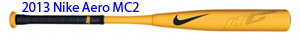
<style>
.page{position:relative;width:300px;height:41px;background:#ffffff}
.page>*{position:absolute;margin:0}
.t1{font:14px "MyriadPro-Regular";color:#0000ff}
</style>
<div class="page">
<p class="t1" style="left:22px;top:2px;width:117px;height:10px">2013 Nike Aero MC2</p>
</div>
